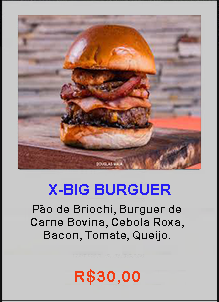
<style>
.page{position:relative;width:219px;height:302px;background:#cbcbcb}
.page>*{position:absolute;margin:0}
.t1{font:14.7px "Arial-BoldMT";color:#261cf4}
.t2{font:10.7px "ArialRoundedMTBold";color:#090909}
.t3{font:16px "ArialRoundedMTBold";color:#f33c12}
</style>
<div class="page">
<p class="t1" style="left:49px;top:184px;width:122px;height:11px">X-BIG BURGUER</p>
<p class="t2" style="left:31px;top:205px;width:153px;height:36px;text-align:center">Pão de Briochi, Burguer de Carne Bovina, Cebola Roxa, <br>Bacon, Tomate, Queijo.</p>
<p class="t3" style="left:75px;top:269px;width:65px;height:16px">R$30,00</p>
</div>
